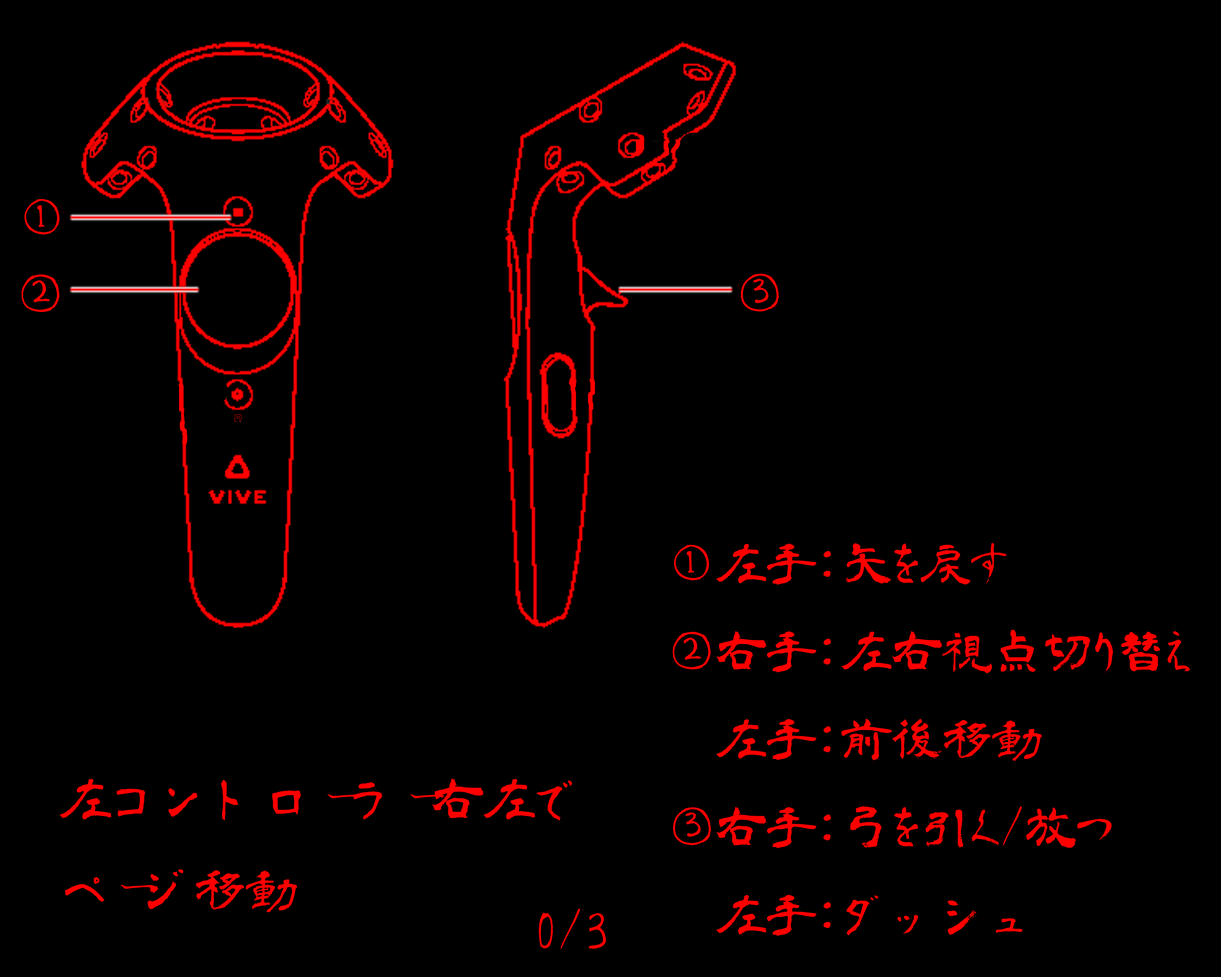
<style>
.page{position:relative;width:1221px;height:977px;background:#000000}
.page>*{position:absolute;margin:0}
.t1{font:50.1px "aoyagireisyosimo2";color:#ff0000}
.t2{font:51.7px "aoyagireisyosimo2";color:#ff0000}
</style>
<div class="page">
<p class="t1" style="left:24px;top:199px;width:36px;height:35px">①</p>
<p class="t1" style="left:22px;top:274px;width:38px;height:38px">②</p>
<p class="t1" style="left:741px;top:273px;width:38px;height:38px">③</p>
<p class="t1" style="left:673px;top:542px;width:517px;height:394px">①左手:矢を戻す<br>②右手:左右視点切り替え<br>　左手:前後移動<br>③右手:弓を引く/放つ<br>　左手:ダッシュ</p>
<p class="t2" style="left:60px;top:778px;width:512px;height:134px">左コントローラー右左で<br>ページ移動</p>
<p class="t2" style="left:539px;top:908px;width:67px;height:41px">0/3</p>
</div>
